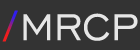
<style>
.page{position:relative;width:140px;height:50px;background:#333333}
.page>*{position:absolute;margin:0}
.t1{font:47.7px "EngraversGothicBT-Regular"}
.t2{font:47.7px "EngraversGothicBT-Regular";color:#e6e6e6}
</style>
<div class="page">
<p class="t1" style="left:2px;top:10px;width:16px;height:32px">/</p>
<p class="t2" style="left:23px;top:13px;width:115px;height:28px">MRCP</p>
</div>
